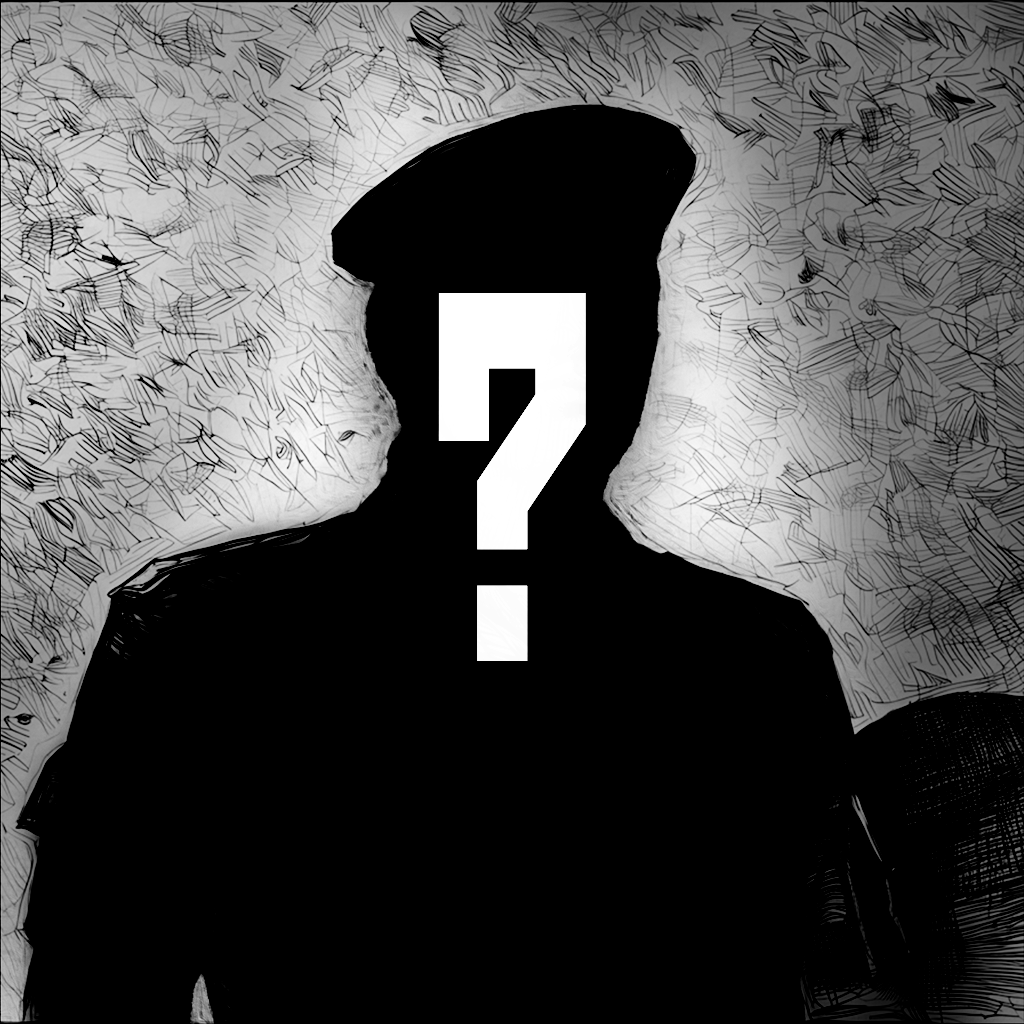
<style>
.page{position:relative;width:1024px;height:1024px;background:#000000}
.page>*{position:absolute;margin:0}
.t1{font:501.4px "KonstruktorRegular";color:#ffffff;scale:0.67 1}
</style>
<div class="page">
<p class="t1" style="left:438px;top:293px;width:148px;height:368px">?</p>
</div>
